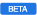
<style>
.page{position:relative;width:37px;height:15px;background:#1f76e3}
.page>*{position:absolute;margin:0}
.t1{font:8px "Helvetica";letter-spacing:-0.05em;color:#ffffff}
</style>
<div class="page">
<p class="t1" style="left:8px;top:6px;width:20px;height:6px">BETA</p>
</div>
